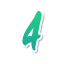
<style>
.page{position:relative;width:64px;height:64px;background:#ffffff}
.page>*{position:absolute;margin:0}
.t1{font:72px "MaroonedOnMarsBB";color:#1cba90}
</style>
<div class="page">
<p class="t1" style="left:22px;top:10px;width:20px;height:41px">4</p>
</div>
